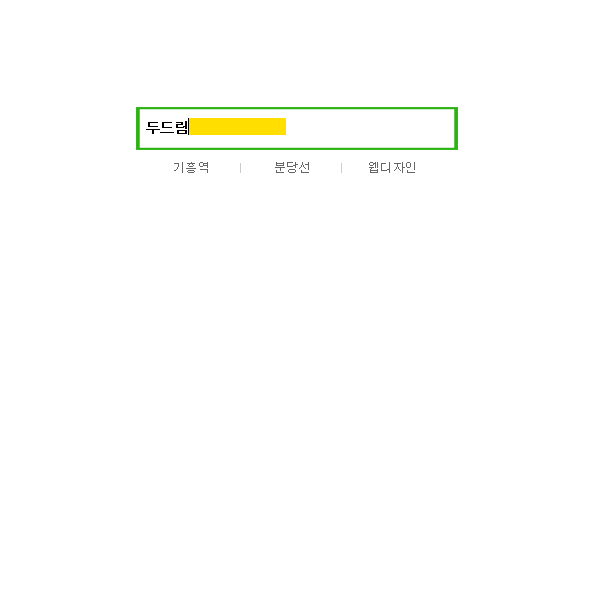
<style>
.page{position:relative;width:600px;height:600px;background:#ffffff}
.page>*{position:absolute;margin:0}
.t1{font:14px "Dotum";letter-spacing:-0.05em;font-weight:bold}
.t2{font:13px "Dotum";letter-spacing:-0.05em;color:#666666}
</style>
<div class="page">
<p class="t1" style="left:146px;top:121px;width:89px;height:13px">두드림 컴퓨터</p>
<p class="t2" style="left:174px;top:162px;width:34px;height:11px">기흥역</p>
<p class="t2" style="left:275px;top:162px;width:34px;height:11px">분당선</p>
<p class="t2" style="left:369px;top:162px;width:46px;height:11px">웹디자인</p>
</div>
